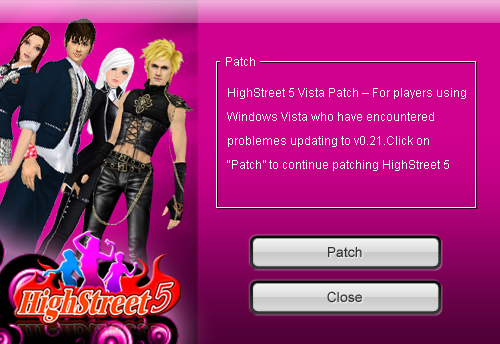
<style>
.page{position:relative;width:500px;height:344px}
.page>*{position:absolute;margin:0}
.t1{font:12px "ArialMT";color:#ffffff}
.t2{font:12px/24px "ArialMT";color:#ffffff}
.t3{font:14px "ArialMT";color:#333333}
</style>
<div class="page">
<p class="t1" style="left:226px;top:57px;width:29px;height:9px">Patch</p>
<p class="t2" style="left:227px;top:88px;width:239px;height:83px">HighStreet 5 Vista Patch – For players using Windows Vista who have encountered problemes updating to v0.21.Click on “Patch” to continue patching HighStreet 5</p>
<p class="t3" style="left:328px;top:247px;width:34px;height:10px">Patch</p>
<p class="t3" style="left:327px;top:291px;width:35px;height:12px">Close</p>
</div>
